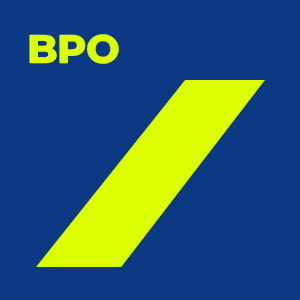
<style>
.page{position:relative;width:300px;height:300px;background:#0b3983}
.page>*{position:absolute;margin:0}
.t1{font:40px "MontserratRoman-ExtraBold";letter-spacing:-0.02em;color:#dcff00}
</style>
<div class="page">
<p class="t1" style="left:29px;top:34px;width:90px;height:30px">BPO</p>
</div>
